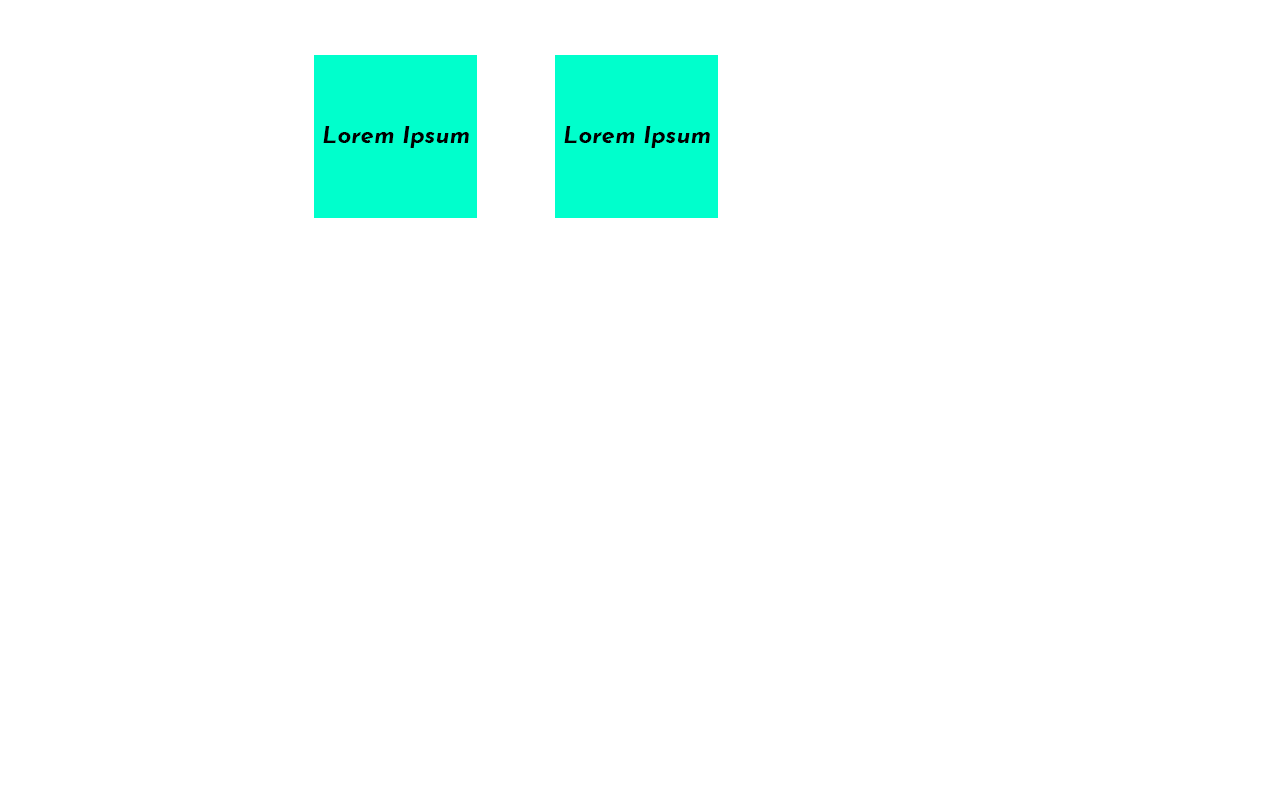
<style>
.page{position:relative;width:1280px;height:800px;background:#ffffff}
.page>*{position:absolute;margin:0}
.t1{font:24px "JosefinSans-BoldItalic";color:#000000}
</style>
<div class="page">
<p class="t1" style="left:323px;top:126px;width:146px;height:22px">Lorem Ipsum</p>
<p class="t1" style="left:564px;top:126px;width:146px;height:22px">Lorem Ipsum</p>
</div>
